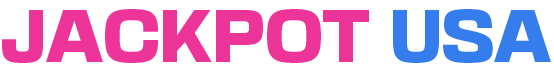
<style>
.page{position:relative;width:554px;height:70px;background:#ffffff}
.page>*{position:absolute;margin:0}
.t1{font:66.6px "BasementGrotesque-Black";color:#ed3599;text-transform:uppercase}
.t2{font:66.6px "BasementGrotesque-Black";color:#357ded;text-transform:uppercase}
</style>
<div class="page">
<p class="t1" style="left:2px;top:9px;width:549px;height:54px">jackpot<span class="t2"> usa</span></p>
</div>
